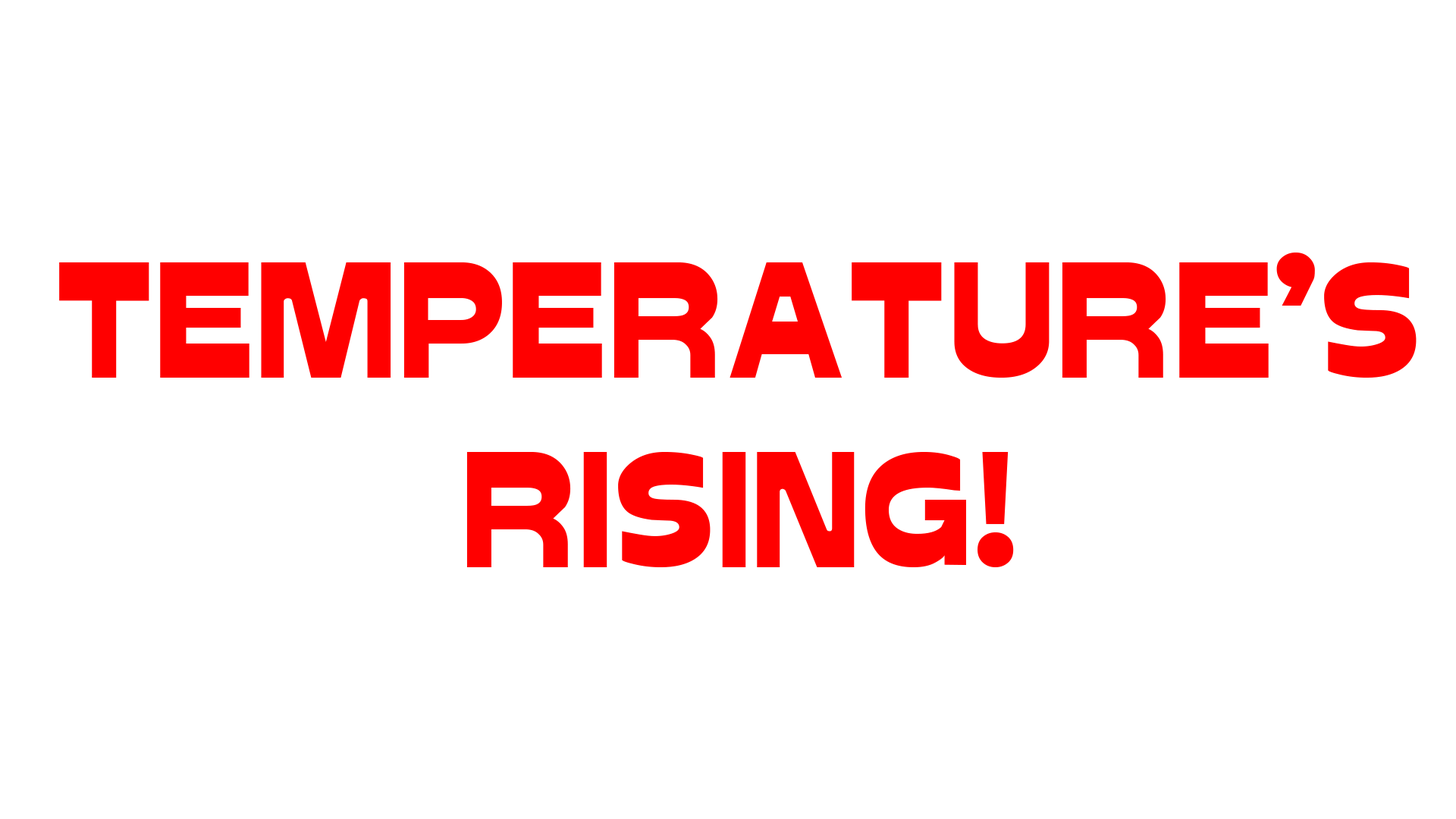
<style>
.page{position:relative;width:1456px;height:819px;background:#ffffff}
.page>*{position:absolute;margin:0}
.t1{font:158px "Glockenspiel";color:#ff0000}
</style>
<div class="page">
<p class="t1" style="left:59px;top:253px;width:1358px;height:314px;text-align:center">TEMPERATURE’S<br>RISING!</p>
</div>
